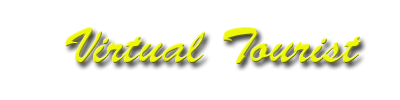
<style>
.page{position:relative;width:400px;height:100px;background:#ffffff}
.page>*{position:absolute;margin:0}
.t1{font:12px "BrushScriptStd"}
</style>
<div class="page">
<p class="t1" style="left:65px;top:27px;width:297px;height:38px">Virtual Tourist</p>
</div>
